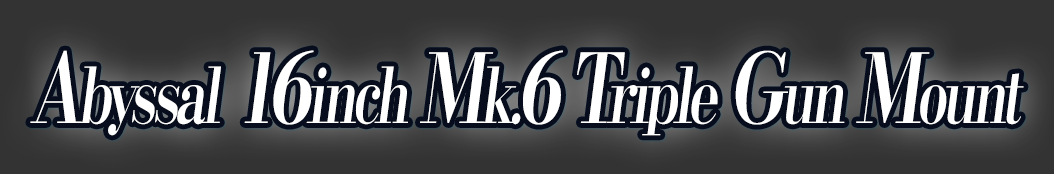
<style>
.page{position:relative;width:1054px;height:174px;background:#333333}
.page>*{position:absolute;margin:0}
.t1{font:76.8px "KochoStd-Heavy";letter-spacing:-0.08em;color:#ffffff;font-style:italic;scale:0.73 1}
.t2{font:96px "KochoStd-Heavy";letter-spacing:-0.08em;color:#ffffff;font-style:italic;scale:0.73 1}
</style>
<div class="page">
<p class="t1" style="left:30px;top:50px;width:994px;height:86px"><span class="t2">A</span>byssal<span class="t2"> 16</span>inch <span class="t2">M</span>k.<span class="t2">6 T</span>riple <span class="t2">G</span>un <span class="t2">M</span>ount</p>
</div>
